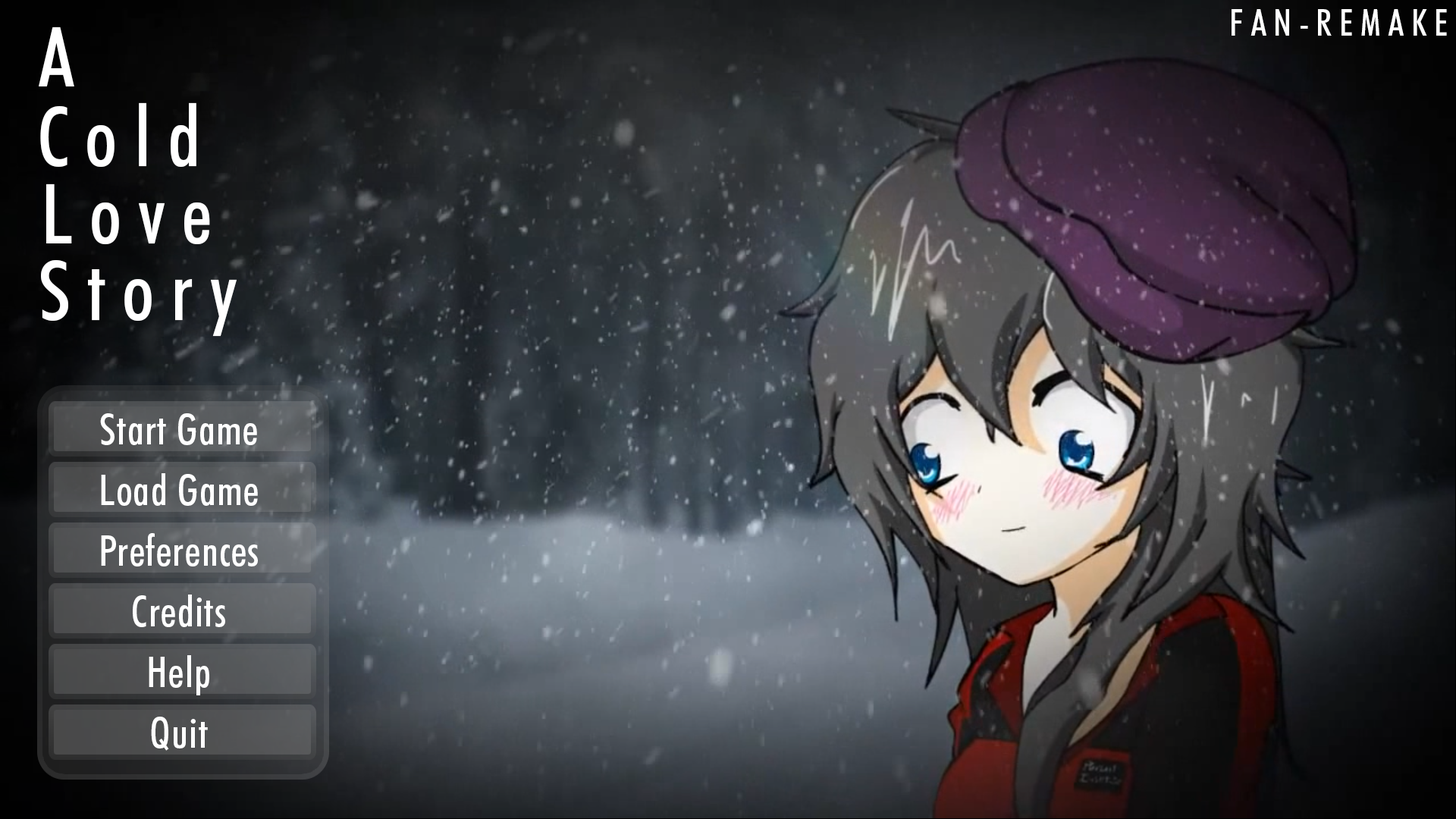
<style>
.page{position:relative;width:1456px;height:819px}
.page>*{position:absolute;margin:0}
.t1{font:36.4px "FuturaBT-MediumCondensed";letter-spacing:0.2em;color:#ffffff}
.t2{font:83.4px "FuturaBT-MediumCondensed";color:#ffffff}
.t3{font:83.4px "FuturaBT-MediumCondensed";letter-spacing:0.2em;color:#ffffff}
.t4{font:42.3px "FuturaBT-MediumCondensed";letter-spacing:0.025em;color:#ffffff}
</style>
<div class="page">
<p class="t1" style="left:1232px;top:9px;width:215px;height:27px">FAN-REMAKE</p>
<p class="t2" style="left:39px;top:27px;width:35px;height:59px">A</p>
<p class="t3" style="left:40px;top:102px;width:156px;height:66px">Cold</p>
<p class="t3" style="left:46px;top:184px;width:164px;height:61px">Love</p>
<p class="t3" style="left:41px;top:260px;width:196px;height:77px">Story</p>
<p class="t4" style="left:100px;top:413px;width:157px;height:32px">Start Game</p>
<p class="t4" style="left:101px;top:473px;width:157px;height:33px">Load Game</p>
<p class="t4" style="left:101px;top:533px;width:157px;height:33px">Preferences</p>
<p class="t4" style="left:133px;top:595px;width:92px;height:32px">Credits</p>
<p class="t4" style="left:149px;top:655px;width:60px;height:40px">Help</p>
<p class="t4" style="left:151px;top:717px;width:57px;height:34px">Quit</p>
</div>
